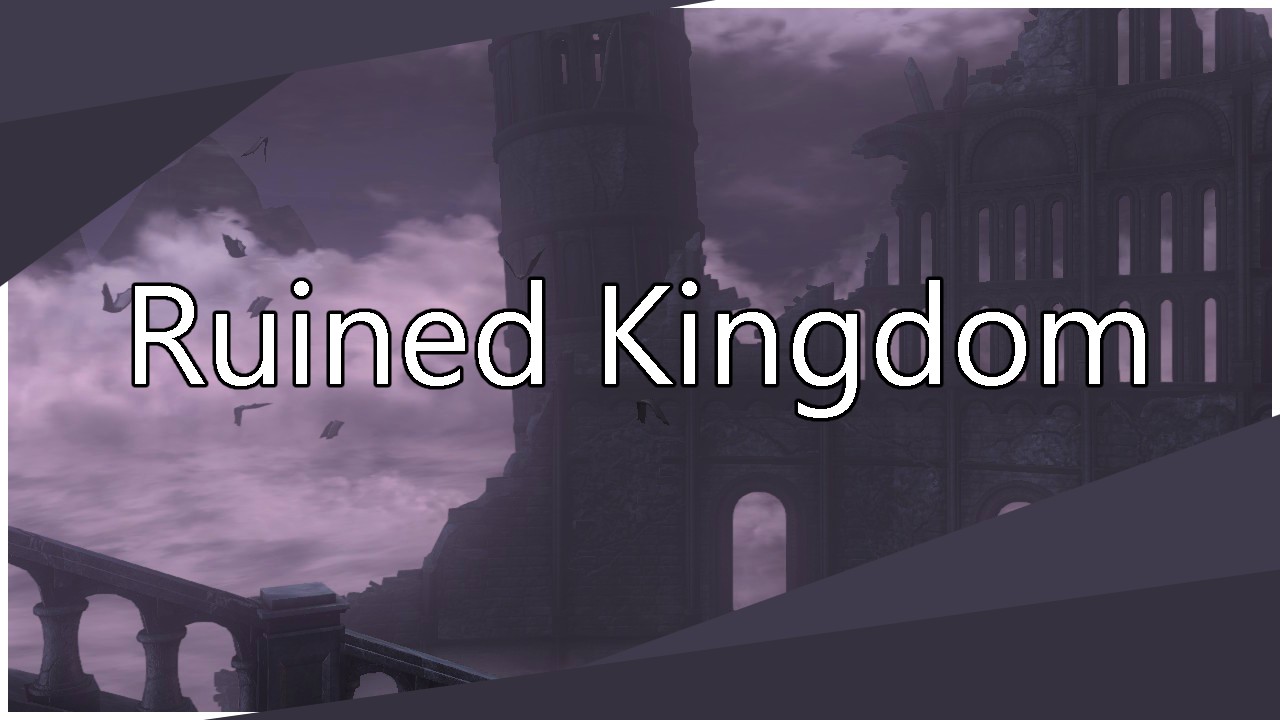
<style>
.page{position:relative;width:1280px;height:720px}
.page>*{position:absolute;margin:0}
.t1{font:140px "SegoeUI";color:#ffffff}
</style>
<div class="page">
<p class="t1" style="left:135px;top:280px;width:1010px;height:138px">Ruined Kingdom</p>
</div>
